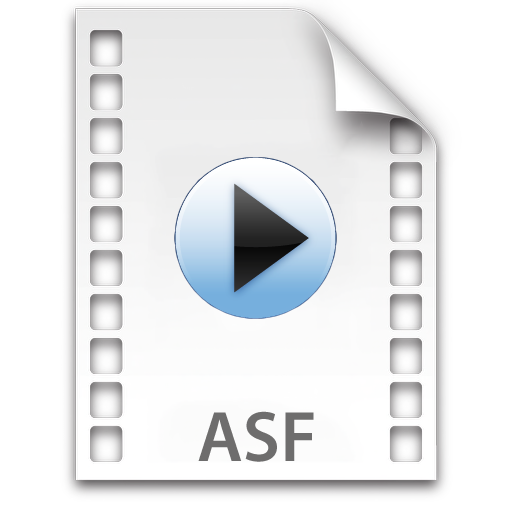
<style>
.page{position:relative;width:512px;height:512px;background:#ffffff}
.page>*{position:absolute;margin:0}
.t1{font:72px "MyriadPro-Semibold";color:#6e6d6d}
</style>
<div class="page">
<p class="t1" style="left:198px;top:411px;width:116px;height:51px">ASF</p>
</div>
